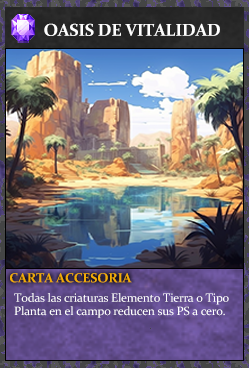
<style>
.page{position:relative;width:249px;height:368px}
.page>*{position:absolute;margin:0}
.t1{font:17.3px "Constantia-Bold";letter-spacing:-0.02em;color:#ffffff}
.t2{font:13.3px "Constantia-Bold";letter-spacing:-0.02em;color:#f2ac05}
.t3{font:12px/13.3px "Constantia";letter-spacing:-0.02em;color:#ffffff}
</style>
<div class="page">
<p class="t1" style="left:44px;top:23px;width:176px;height:13px">OASIS DE VITALIDAD</p>
<p class="t2" style="left:10px;top:273px;width:122px;height:10px">CARTA ACCESORIA</p>
<p class="t3" style="left:14px;top:293px;width:215px;height:25px">Todas las criaturas Elemento Tierra o Tipo<br>Planta en el campo reducen sus PS a cero.</p>
</div>
